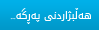
<style>
.page{position:relative;width:99px;height:30px}
.page>*{position:absolute;margin:0}
.t1{font:10px "DroidArabicKufi";color:#ffffff}
</style>
<div class="page">
<p class="t1" style="left:10px;top:8px;width:81px;height:16px">هەڵبژاردنی پەڕگە...</p>
</div>
